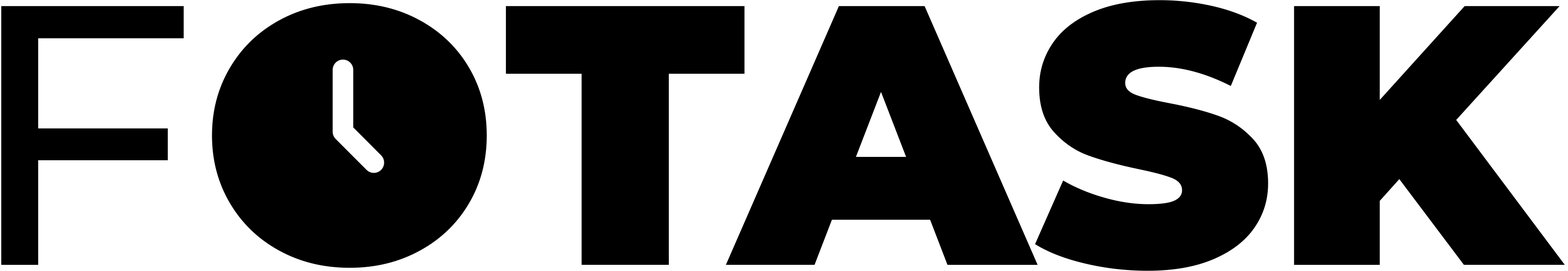
<style>
.page{position:relative;width:1568px;height:271px;background:#000000}
.page>*{position:absolute;margin:0}
.t1{font:369.3px "Montserrat-Black";color:#000000;text-transform:uppercase}
.t2{font:369.3px "Montserrat-Medium";color:#000000;text-transform:uppercase}
</style>
<div class="page">
<p class="t1" style="left:1px;top:0px;width:1564px;height:271px"><span class="t2">Fo</span>TASK</p>
</div>
